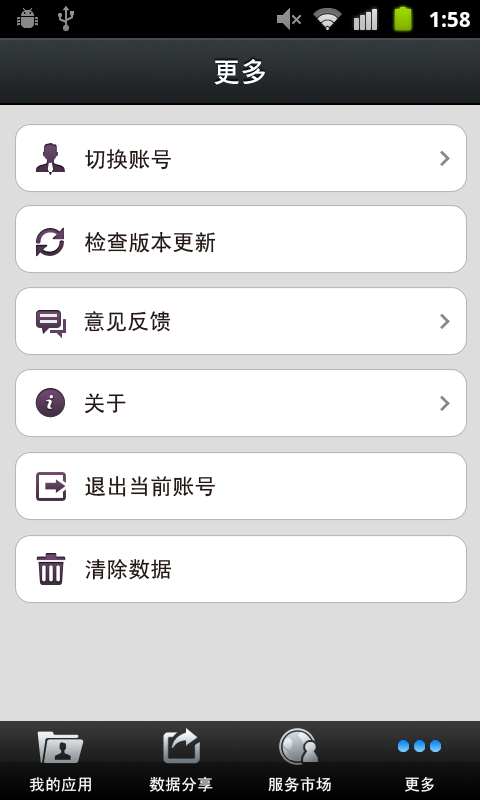
<style>
.page{position:relative;width:480px;height:800px;background:#ffffff}
.page>*{position:absolute;margin:0}
.t1{font:27px "CTCuHeiSJ";color:#ffffff}
.t2{font:22px "SimHei";color:#231815}
.t3{font:16px "SimHei";color:#ffffff}
</style>
<div class="page">
<p class="t1" style="left:214px;top:59px;width:51px;height:26px">更多</p>
<p class="t2" style="left:85px;top:149px;width:86px;height:21px">切换账号</p>
<p class="t2" style="left:85px;top:231px;width:131px;height:22px">检查版本更新</p>
<p class="t2" style="left:84px;top:311px;width:87px;height:21px">意见反馈</p>
<p class="t2" style="left:84px;top:393px;width:42px;height:21px">关于</p>
<p class="t2" style="left:85px;top:476px;width:130px;height:21px">退出当前账号</p>
<p class="t2" style="left:85px;top:559px;width:87px;height:21px">清除数据</p>
<p class="t3" style="left:29px;top:777px;width:62px;height:15px">我的应用</p>
<p class="t3" style="left:149px;top:776px;width:64px;height:16px">数据分享</p>
<p class="t3" style="left:268px;top:776px;width:63px;height:16px">服务市场</p>
<p class="t3" style="left:405px;top:776px;width:29px;height:16px">更多</p>
</div>
